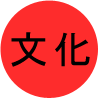
<style>
.page{position:relative;width:99px;height:99px;background:#fe2c2c}
.page>*{position:absolute;margin:0}
.t1{font:40px "MS-Gothic";letter-spacing:0.1em;color:#010101}
</style>
<div class="page">
<p class="t1" style="left:11px;top:32px;width:79px;height:35px">文化</p>
</div>
